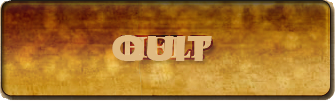
<style>
.page{position:relative;width:335px;height:101px}
.page>*{position:absolute;margin:0}
.t1{font:38px "ErasITC-Bold";color:#dfb981}
</style>
<div class="page">
<p class="t1" style="left:112px;top:35px;width:100px;height:26px">QUIT</p>
</div>
